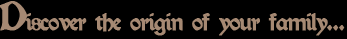
<style>
.page{position:relative;width:347px;height:39px;background:#000000}
.page>*{position:absolute;margin:0}
.t1{font:21.5px "Kelmscott-Regular";letter-spacing:-0.075em;color:#a68973;font-weight:bold}
.t2{font:36px "Kelmscott-Regular";letter-spacing:-0.075em;color:#a68973;font-weight:bold}
</style>
<div class="page">
<p class="t1" style="left:0px;top:1px;width:345px;height:35px"><span class="t2">D</span>iscover the origin of your family...</p>
</div>
